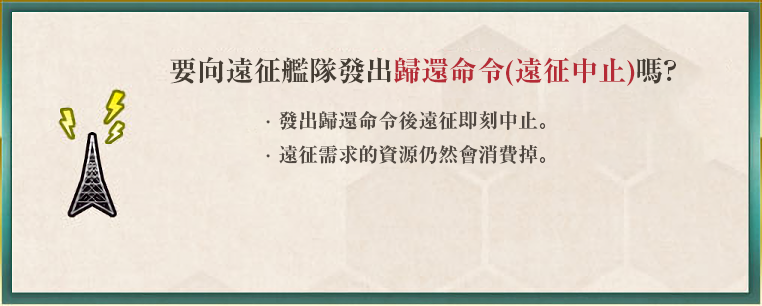
<style>
.page{position:relative;width:762px;height:306px}
.page>*{position:absolute;margin:0}
.t1{font:28px "RyuminPr6N-ExBold";color:#b52b36}
.t2{font:28px "RyuminPr6N-ExBold";color:#443c33}
.t3{font:20px/34px "RyuminPr6N-ExBold";color:#504841}
.t4{font:20px/34px "DFKaiShu-SB-Estd-BF";color:#504841}
</style>
<div class="page">
<p class="t1" style="left:170px;top:56px;width:506px;height:30px"><span class="t2">要向遠征艦隊發出</span>歸還命令(遠征中止)<span class="t2">嗎?</span></p>
<p class="t3" style="left:266px;top:110px;width:280px;height:54px"><span class="t4">．</span>發出歸還命令後遠征即刻中止。<br><span class="t4">．</span>遠征需求的資源仍然會消費掉。</p>
</div>
